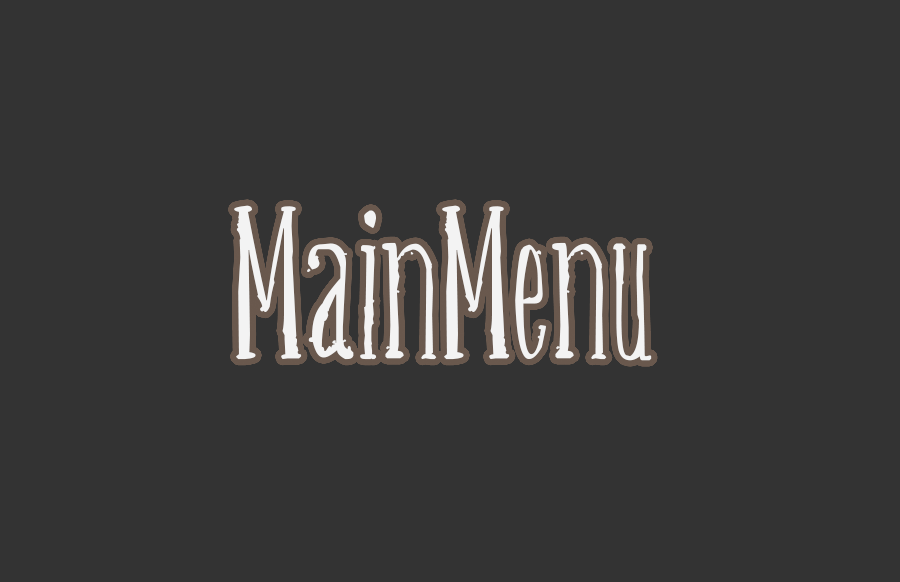
<style>
.page{position:relative;width:900px;height:582px;background:#333333}
.page>*{position:absolute;margin:0}
.t1{font:166.7px "Belisaplumillamanual";color:#f3f3f3}
</style>
<div class="page">
<p class="t1" style="left:234px;top:205px;width:418px;height:156px">MainMenu</p>
</div>
